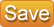
<style>
.page{position:relative;width:54px;height:27px}
.page>*{position:absolute;margin:0}
.t1{font:20px "ArialMT";color:#ffffff}
</style>
<div class="page">
<p class="t1" style="left:4px;top:3px;width:46px;height:23px">Save</p>
</div>
